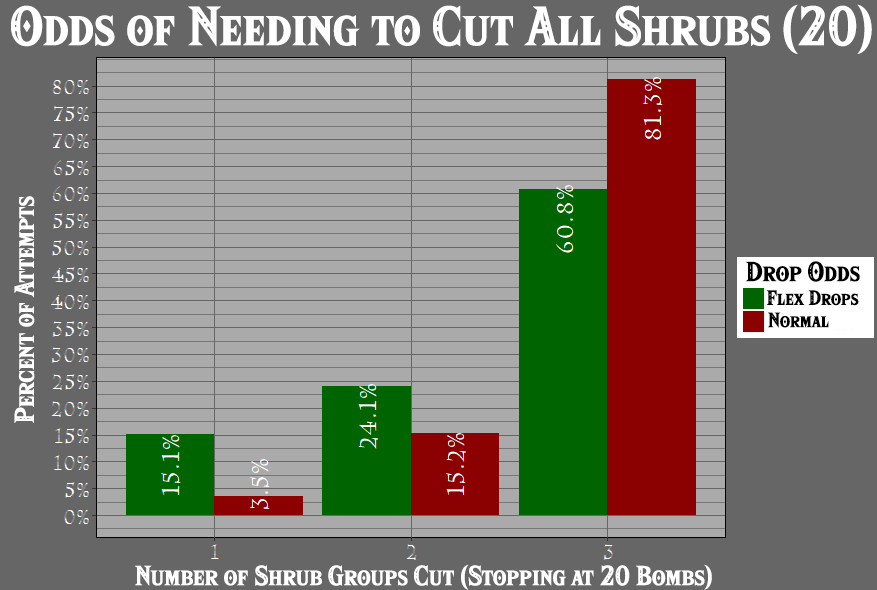
<style>
.page{position:relative;width:877px;height:590px;background:#aaaaaa}
.page>*{position:absolute;margin:0}
.t1{font:48px "HyliaSerifBeta-Regular";color:#ffffff}
.t2{font:24px "HyliaSerifBeta-Regular";color:#ffffff}
.t3{font:24px "HyliaSerifBeta-Regular";color:#000000}
.t4{font:18px "HyliaSerifBeta-Regular";color:#000000}
</style>
<div class="page">
<p class="t1" style="left:11px;top:4px;width:861px;height:50px">Odds of Needing to Cut All Shrubs (20)</p>
<p class="t2" style="left:14px;top:196px;width:21px;height:227px;rotate:-90deg">Percent of Attempts</p>
<p class="t3" style="left:746px;top:261px;width:114px;height:21px">Drop Odds</p>
<p class="t4" style="left:766px;top:290px;width:93px;height:16px">Flex Drops</p>
<p class="t4" style="left:768px;top:312px;width:61px;height:16px">Normal</p>
<p class="t2" style="left:135px;top:564px;width:577px;height:26px">Number of Shrub Groups Cut (Stopping at 20 Bombs)</p>
</div>
